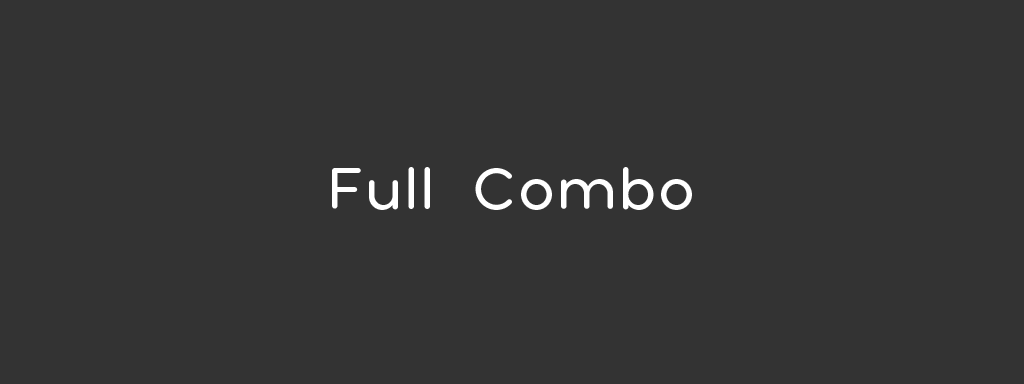
<style>
.page{position:relative;width:1024px;height:384px;background:#333333}
.page>*{position:absolute;margin:0}
.t1{font:60px "PollyRounded-Regular";color:#ffffff}
</style>
<div class="page">
<p class="t1" style="left:332px;top:167px;width:360px;height:43px">Full Combo</p>
</div>
